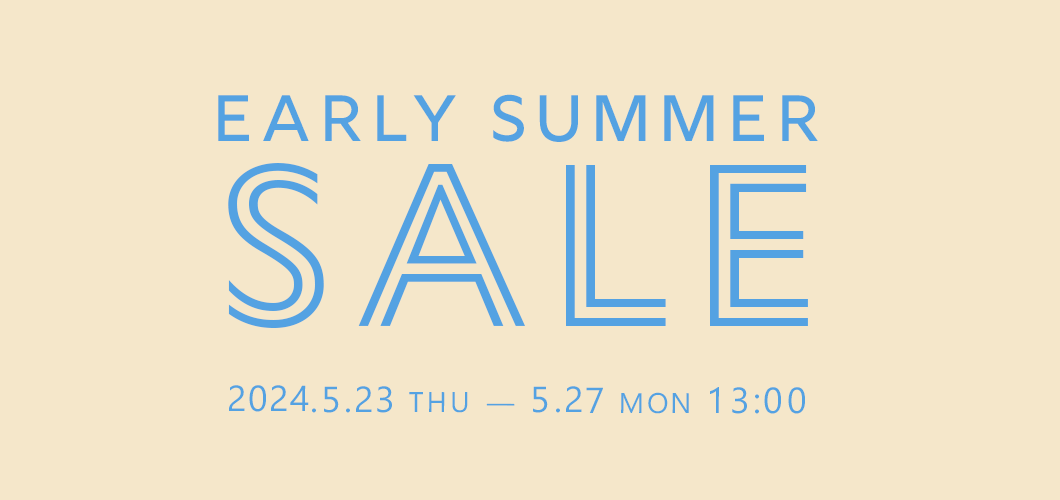
<style>
.page{position:relative;width:1060px;height:500px;background:#f5e7ca}
.page>*{position:absolute;margin:0}
.t1{font:65.2px "Rig-MediumFace";letter-spacing:0.075em;color:#54a2e2}
.t2{font:236.1px "GillSansNovaInline-Light";letter-spacing:0.1em;color:#54a2e2}
</style>
<div class="page">
<p class="t1" style="left:218px;top:94px;width:600px;height:48px">EARLY SUMMER</p>
<p class="t2" style="left:228px;top:163px;width:580px;height:165px">SALE</p>
</div>
